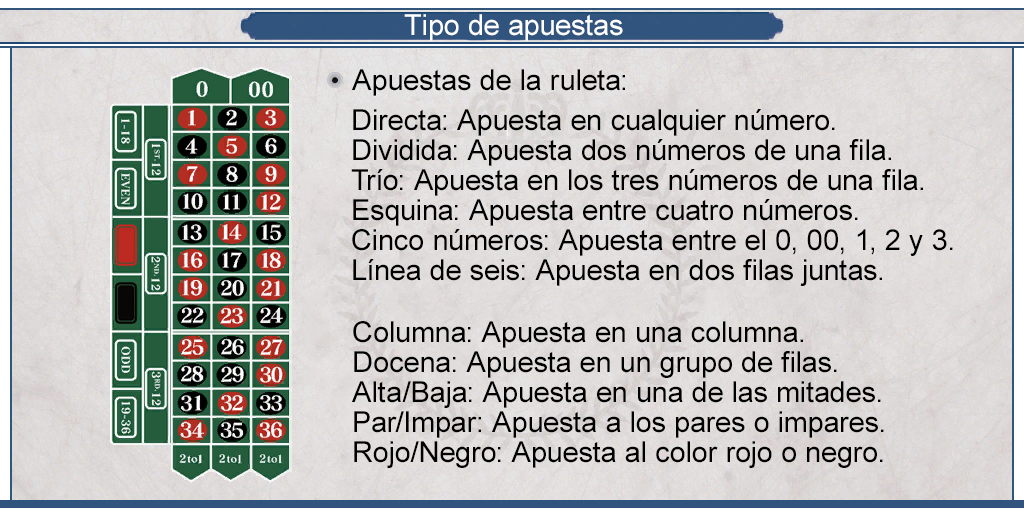
<style>
.page{position:relative;width:1024px;height:512px}
.page>*{position:absolute;margin:0}
.t1{font:29px "ArialMT";color:#fefefe}
.t2{font:29px "ArialMT";color:#000000}
.t3{font:29px/30px "ArialMT";color:#000000}
</style>
<div class="page">
<p class="t1" style="left:404px;top:14px;width:219px;height:27px">Tipo de apuestas</p>
<p class="t2" style="left:352px;top:69px;width:273px;height:27px">Apuestas de la ruleta:</p>
<p class="t3" style="left:351px;top:109px;width:602px;height:177px">Directa: Apuesta en cualquier número.<br>Dividida: Apuesta dos números de una fila.<br>Trío: Apuesta en los tres números de una fila.<br>Esquina: Apuesta entre cuatro números.<br>Cinco números: Apuesta entre el 0, 00, 1, 2 y 3.<br>Línea de seis: Apuesta en dos filas juntas.</p>
<p class="t3" style="left:352px;top:321px;width:532px;height:147px">Columna: Apuesta en una columna.<br>Docena: Apuesta en un grupo de filas.<br>Alta/Baja: Apuesta en una de las mitades.<br>Par/Impar: Apuesta a los pares o impares.<br>Rojo/Negro: Apuesta al color rojo o negro.</p>
</div>
